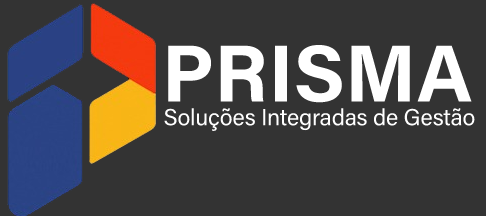
<style>
.page{position:relative;width:486px;height:216px;background:#333333}
.page>*{position:absolute;margin:0}
.t1{font:80.8px "AcuminConcept-Bold";letter-spacing:0.005em;color:#ffffff}
.t2{font:23.3px "AcuminConcept-Regular";letter-spacing:-0.01em;color:#ffffff}
</style>
<div class="page">
<p class="t1" style="left:168px;top:45px;width:304px;height:58px">PRISMA</p>
<p class="t2" style="left:164px;top:108px;width:311px;height:23px">Soluções Integradas de Gestão</p>
</div>
